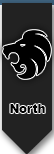
<style>
.page{position:relative;width:54px;height:154px;background:#222222}
.page>*{position:absolute;margin:0}
.t1{font:11.7px "Arial-Black";letter-spacing:-0.01em;color:#000000}
</style>
<div class="page">
<p class="t1" style="left:10px;top:104px;width:35px;height:9px">North</p>
</div>
